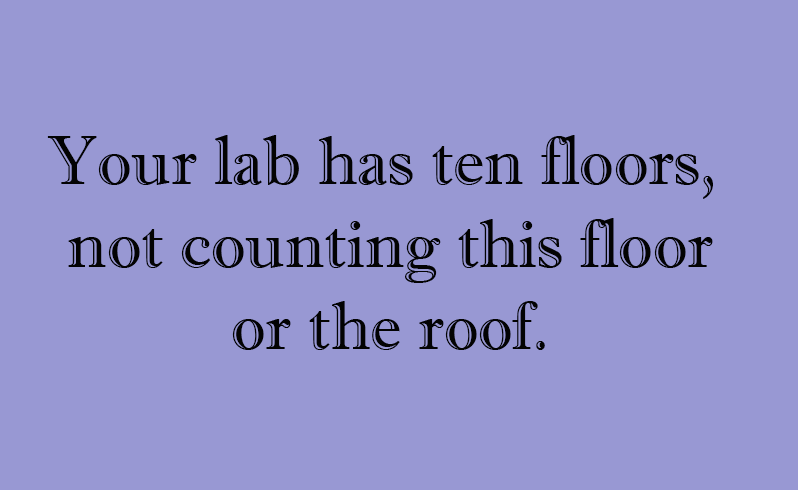
<style>
.page{position:relative;width:798px;height:490px;background:#9898d3}
.page>*{position:absolute;margin:0}
.t1{font:68.7px "ImprintMT-Shadow";color:#030303}
</style>
<div class="page">
<p class="t1" style="left:47px;top:135px;width:666px;height:215px;text-align:center">Your lab has ten floors, <br>not counting this floor<br>or the roof.</p>
</div>
